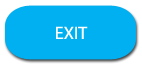
<style>
.page{position:relative;width:142px;height:65px;background:#00b0f0}
.page>*{position:absolute;margin:0}
.t1{font:18px "MyriadPro-Regular";color:#ffffff}
</style>
<div class="page">
<p class="t1" style="left:56px;top:26px;width:32px;height:13px">EXIT</p>
</div>
